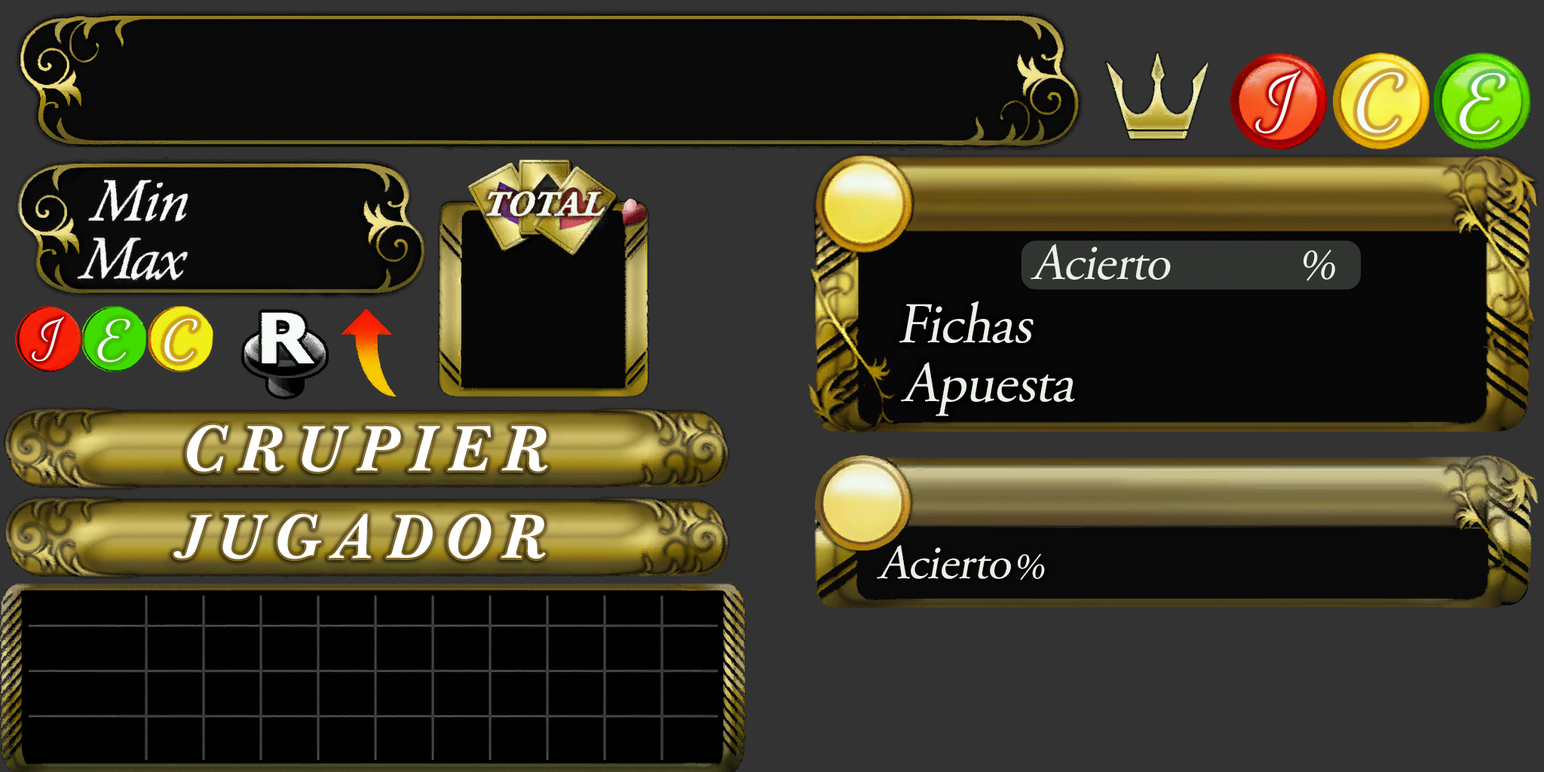
<style>
.page{position:relative;width:1544px;height:772px;background:#333333}
.page>*{position:absolute;margin:0}
.t1{font:53.7px "ElicitScript-Regular";letter-spacing:-0.06em;color:#f8f8f8}
.t2{font:75.2px "ElicitScript-Regular";letter-spacing:-0.06em;color:#f8f8f8}
.t3{font:72.2px "ElicitScript-Regular";letter-spacing:-0.06em;color:#f8f8f8}
.t4{font:51.6px "AGaramondPro-Regular";color:#ebf1e8;font-style:italic}
.t5{font:44.5px "AGaramondPro-Regular";color:#ebf1e8;font-style:italic}
.t6{font:57.3px "AGaramondPro-Regular";color:#ebf1e8;font-style:italic}
.t7{font:37.9px "ElicitScript-Regular";letter-spacing:-0.06em;color:#f8f8f8}
.t8{font:50.9px "ElicitScript-Regular";letter-spacing:-0.06em;color:#f8f8f8}
.t9{font:53.1px "ElicitScript-Regular";letter-spacing:-0.06em;color:#f8f8f8}
.t10{font:66.2px "BaskervilleBT-BoldItalic";letter-spacing:0.2em;color:#fefefe}
.t11{font:45.1px "BaskervilleBT-BoldItalic";letter-spacing:0.2em;color:#fefefe;scale:1.41 1}
.t12{font:64.2px "BaskervilleBT-BoldItalic";letter-spacing:0.2em;color:#fefefe}
.t13{font:49px "AGaramondPro-Regular";color:#ebf1e8;font-style:italic}
.t14{font:37.3px "AGaramondPro-Regular";color:#ebf1e8;font-style:italic}
</style>
<div class="page">
<p class="t1" style="left:1255px;top:70px;width:46px;height:63px">J</p>
<p class="t2" style="left:1357px;top:72px;width:47px;height:61px">C</p>
<p class="t3" style="left:1460px;top:72px;width:46px;height:62px">E</p>
<p class="t4" style="left:1031px;top:244px;width:304px;height:37px">Acierto          <span class="t5">%</span></p>
<p class="t6" style="left:900px;top:301px;width:134px;height:42px">Fichas</p>
<p class="t7" style="left:32px;top:317px;width:32px;height:44px">J</p>
<p class="t8" style="left:97px;top:319px;width:33px;height:44px">E</p>
<p class="t9" style="left:164px;top:318px;width:34px;height:44px">C</p>
<p class="t6" style="left:901px;top:362px;width:174px;height:54px">Apuesta</p>
<p class="t10" style="left:187px;top:425px;width:361px;height:47px">CRUPIER</p>
<p class="t11" style="left:173px;top:514px;width:39px;height:45px;rotate:-2deg">J</p>
<p class="t12" style="left:222px;top:514px;width:324px;height:46px">UGADOR</p>
<p class="t13" style="left:877px;top:545px;width:168px;height:35px">Acierto <span class="t14">%</span></p>
</div>
